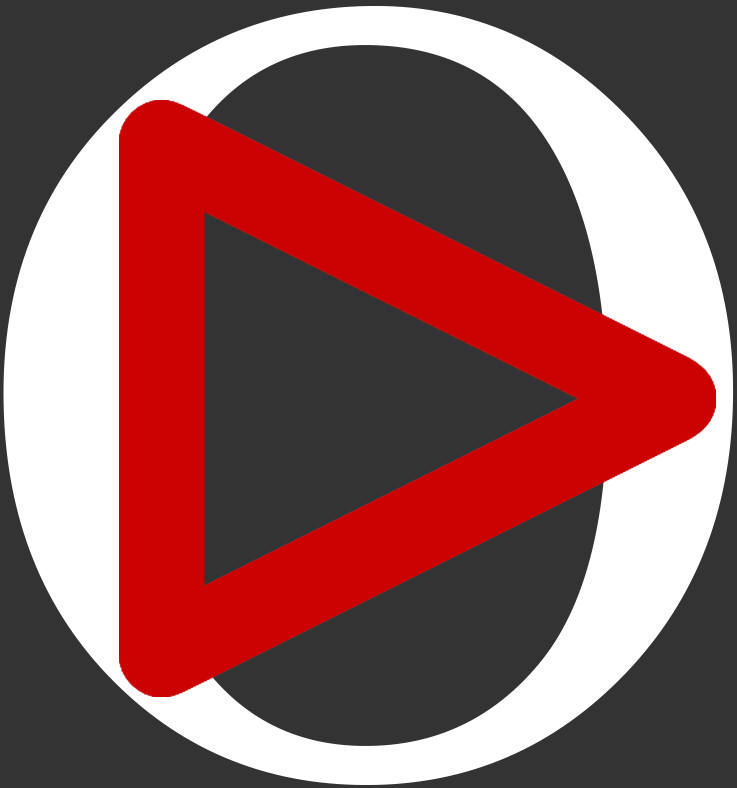
<style>
.page{position:relative;width:737px;height:788px;background:#333333}
.page>*{position:absolute;margin:0}
.t1{font:1124.7px "TimesNewRomanPSMT";color:#ffffff}
</style>
<div class="page">
<p class="t1" style="left:3px;top:6px;width:731px;height:779px">O</p>
</div>
